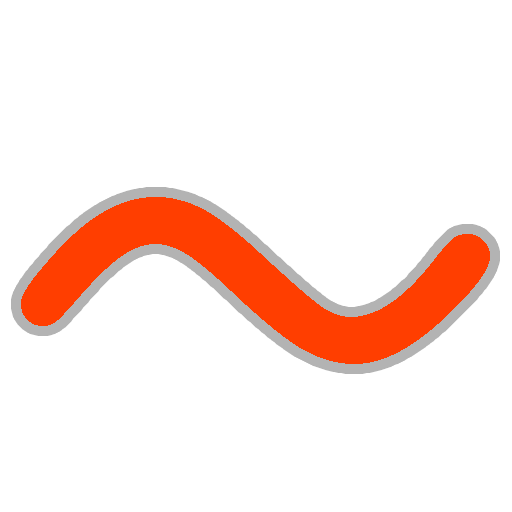
<style>
.page{position:relative;width:512px;height:512px;background:#ffffff}
.page>*{position:absolute;margin:0}
.t1{font:1120px "CourierNewPSMT";color:#ff3e00}
</style>
<div class="page">
<p class="t1" style="left:21px;top:197px;width:469px;height:167px">~</p>
</div>
